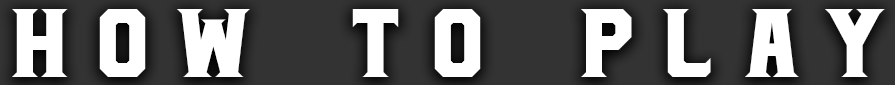
<style>
.page{position:relative;width:895px;height:85px;background:#333333}
.page>*{position:absolute;margin:0}
.t1{font:97px "COMPANYRegular";letter-spacing:0.3em;color:#ffffff}
</style>
<div class="page">
<p class="t1" style="left:12px;top:9px;width:873px;height:68px">HOW TO PLAY</p>
</div>
